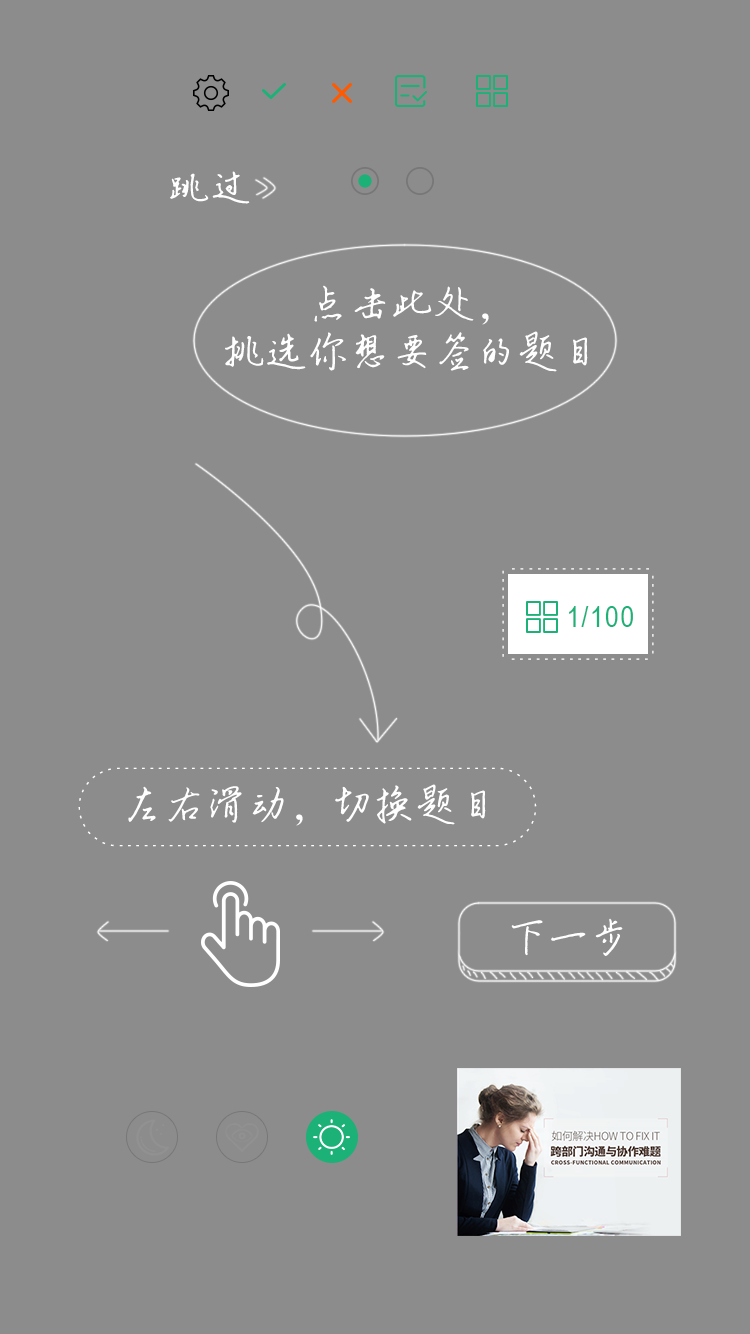
<style>
.page{position:relative;width:750px;height:1334px;background:#8c8c8c}
.page>*{position:absolute;margin:0}
.t1{font:42px "ÊéÌå·»ÕÔ¾Å½­¸Ö±ÊÐÐÊé";color:#fffefe}
.t2{font:42px/48px "ÊéÌå·»ÕÔ¾Å½­¸Ö±ÊÐÐÊé";color:#fffefe}
.t3{font:30px "ArialNarrow";letter-spacing:0.05em;color:#1cb177}
.t4{font:10px/42px "Arial-BoldMT";letter-spacing:0.5em;color:#ffffff}
</style>
<div class="page">
<p class="t1" style="left:170px;top:171px;width:80px;height:33px">跳过</p>
<p class="t2" style="left:225px;top:285px;width:363px;height:87px;text-align:center">点击此处，<br>挑选你想要签的题目</p>
<p class="t3" style="left:569px;top:606px;width:64px;height:21px">1/100</p>
<p class="t4" style="left:78px;top:767px;width:459px;height:80px;text-align:center">--------------------------------------------------------------------------------------------------------------------------------------------------------------------------------------------------------------------------------------------------------------------------------------------------------------------------------</p>
<p class="t1" style="left:128px;top:784px;width:358px;height:42px">左右滑动，切换题目</p>
<p class="t1" style="left:511px;top:918px;width:112px;height:38px">下一步</p>
</div>
